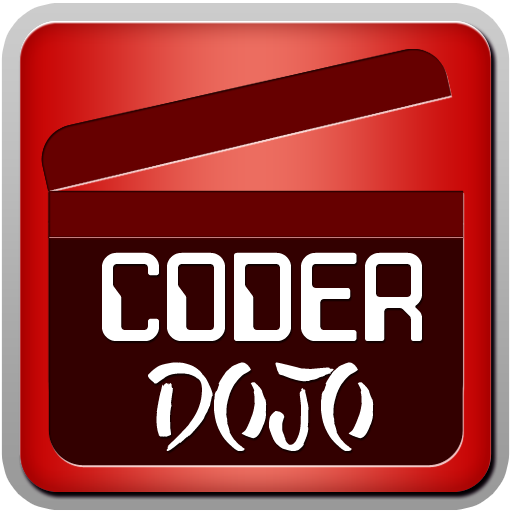
<style>
.page{position:relative;width:512px;height:512px;background:#330000}
.page>*{position:absolute;margin:0}
.t1{font:125.8px/110px "JLSSpaceGothic-RNC";color:#ffffff;text-transform:uppercase}
.t2{font:125.8px/110px "All-Yoko";color:#ffffff}
</style>
<div class="page">
<p class="t1" style="left:102px;top:252px;width:320px;height:199px;text-align:center">Coder<br><span class="t2">Dojo</span></p>
</div>
